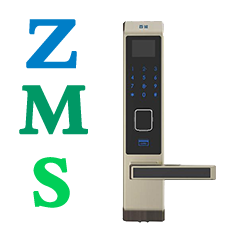
<style>
.page{position:relative;width:240px;height:240px;background:#ffffff}
.page>*{position:absolute;margin:0}
.t1{font:75px "2.0-";color:#007ec7;font-weight:bold}
.t2{font:75px "2.0-";color:#009865;font-weight:bold}
.t3{font:75px "2.0-";color:#00cf58;font-weight:bold}
</style>
<div class="page">
<p class="t1" style="left:26px;top:19px;width:51px;height:50px">Z</p>
<p class="t2" style="left:19px;top:85px;width:69px;height:50px">M</p>
<p class="t3" style="left:33px;top:157px;width:37px;height:51px">S</p>
</div>
